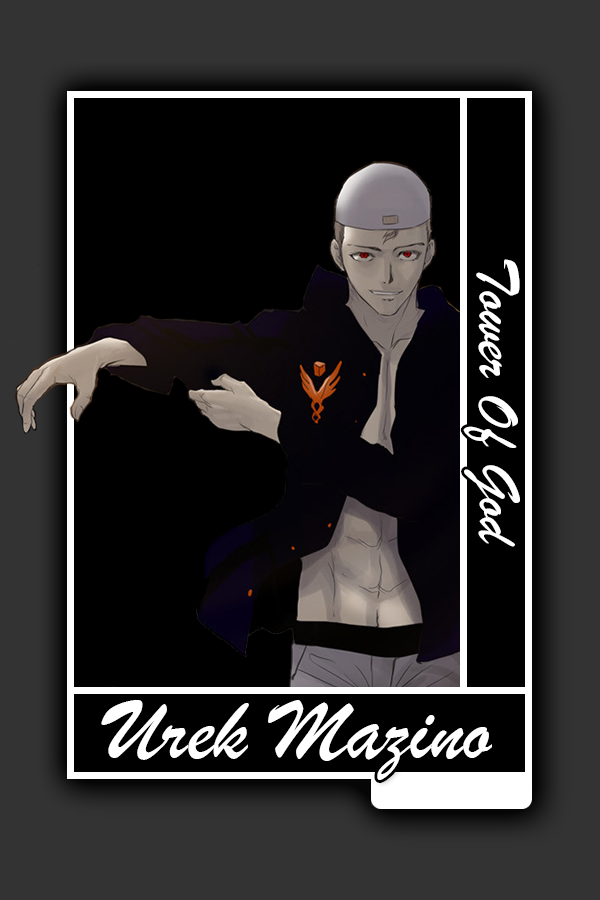
<style>
.page{position:relative;width:600px;height:900px;background:#000000}
.page>*{position:absolute;margin:0}
.t1{font:61.5px "BrushScriptMT";color:#ffffff}
.t2{font:89.7px "BrushScriptMT";color:#ffffff}
</style>
<div class="page">
<p class="t1" style="left:463px;top:259px;width:57px;height:288px;rotate:90deg">Tower Of God</p>
<p class="t2" style="left:101px;top:700px;width:391px;height:80px">Urek Mazino</p>
</div>
